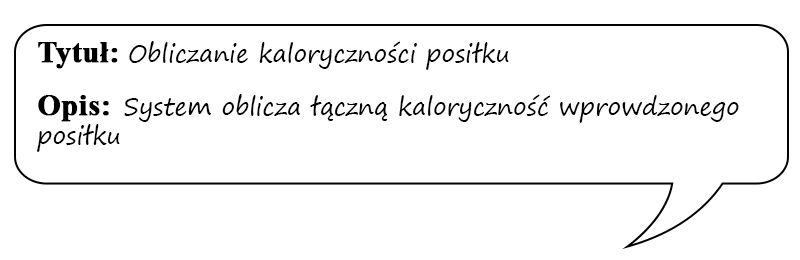
<style>
.page{position:relative;width:800px;height:260px;background:#ffffff}
.page>*{position:absolute;margin:0}
.t1{font:24px "SegoePrint";color:#000000}
.t2{font:30px "TimesNewRomanPS-BoldMT";color:#000000;font-weight:bold}
</style>
<div class="page">
<p class="t1" style="left:37px;top:41px;width:702px;height:111px"><span class="t2">Tytuł: </span>Obliczanie kaloryczności posiłku<br><br><span class="t2">Opis:  </span>System oblicza łączną kaloryczność wprowdzonego posiłku</p>
</div>
